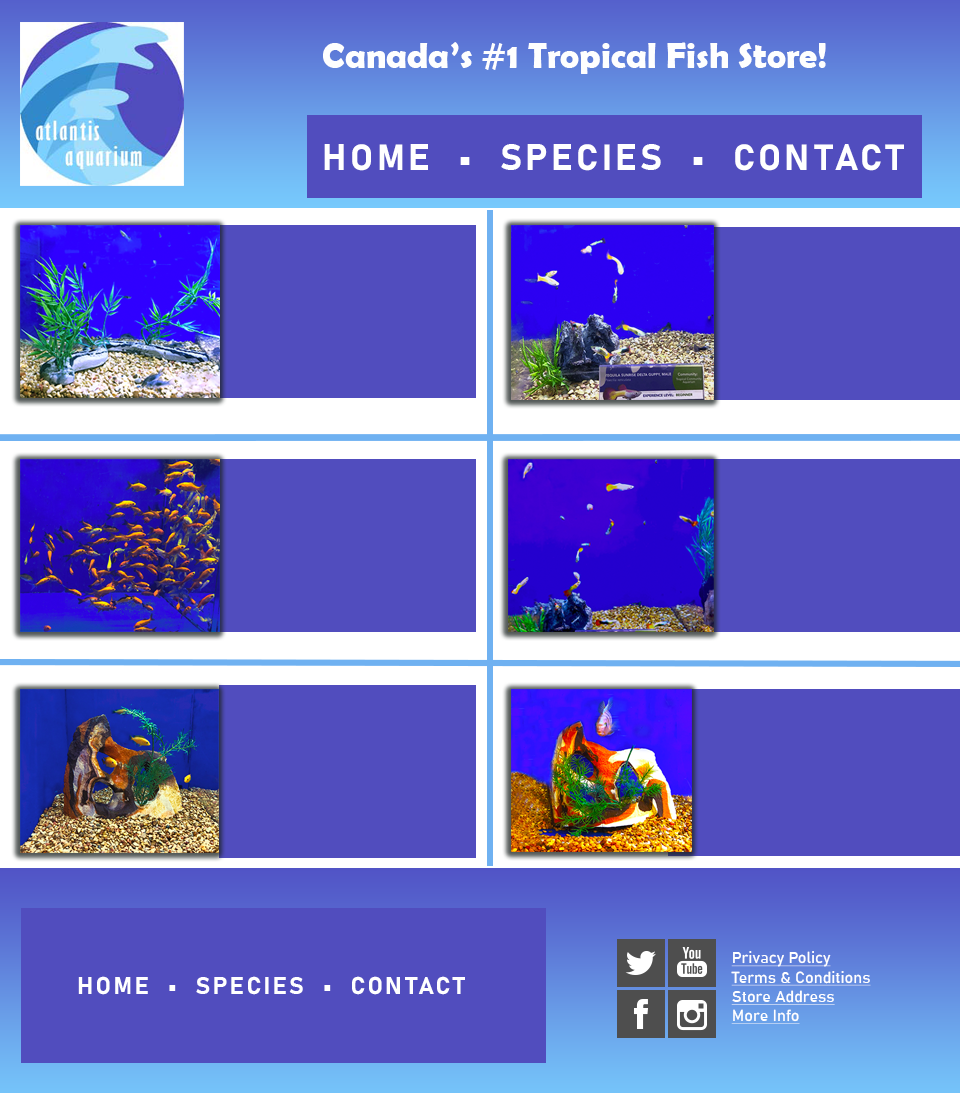
<style>
.page{position:relative;width:960px;height:1093px;background:#514dbe}
.page>*{position:absolute;margin:0}
.t1{font:36px "BerlinSansFBDemi-Bold";color:#fefefe}
.t2{font:36px "Bahnschrift-Bold";letter-spacing:0.1em;color:#ffffff}
.t3{font:16px "Bahnschrift";color:#ffffff;text-decoration:underline}
.t4{font:24px "Bahnschrift-Bold";letter-spacing:0.1em;color:#ffffff}
</style>
<div class="page">
<p class="t1" style="left:323px;top:42px;width:503px;height:32px">Canada’s #1 Tropical Fish Store!</p>
<p class="t2" style="left:324px;top:144px;width:580px;height:27px">HOME  •  SPECIES  •  CONTACT</p>
<p class="t3" style="left:731px;top:951px;width:140px;height:73px">Privacy Policy<br>Terms &amp; Conditions<br>Store Address<br>More Info</p>
<p class="t4" style="left:78px;top:976px;width:387px;height:19px">HOME  •  SPECIES  •  CONTACT</p>
</div>
